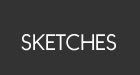
<style>
.page{position:relative;width:140px;height:75px;background:#333333}
.page>*{position:absolute;margin:0}
.t1{font:21.3px "WatchwordRegularDemo";color:#ffffff}
</style>
<div class="page">
<p class="t1" style="left:21px;top:34px;width:95px;height:17px">SKETCHES</p>
</div>
